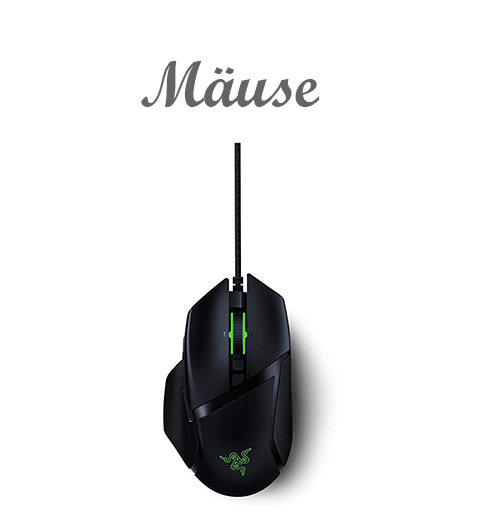
<style>
.page{position:relative;width:499px;height:526px;background:#ffffff}
.page>*{position:absolute;margin:0}
.t1{font:64px "ScriptMTBold";color:#656464}
</style>
<div class="page">
<p class="t1" style="left:141px;top:61px;width:179px;height:46px">Mäuse</p>
</div>
